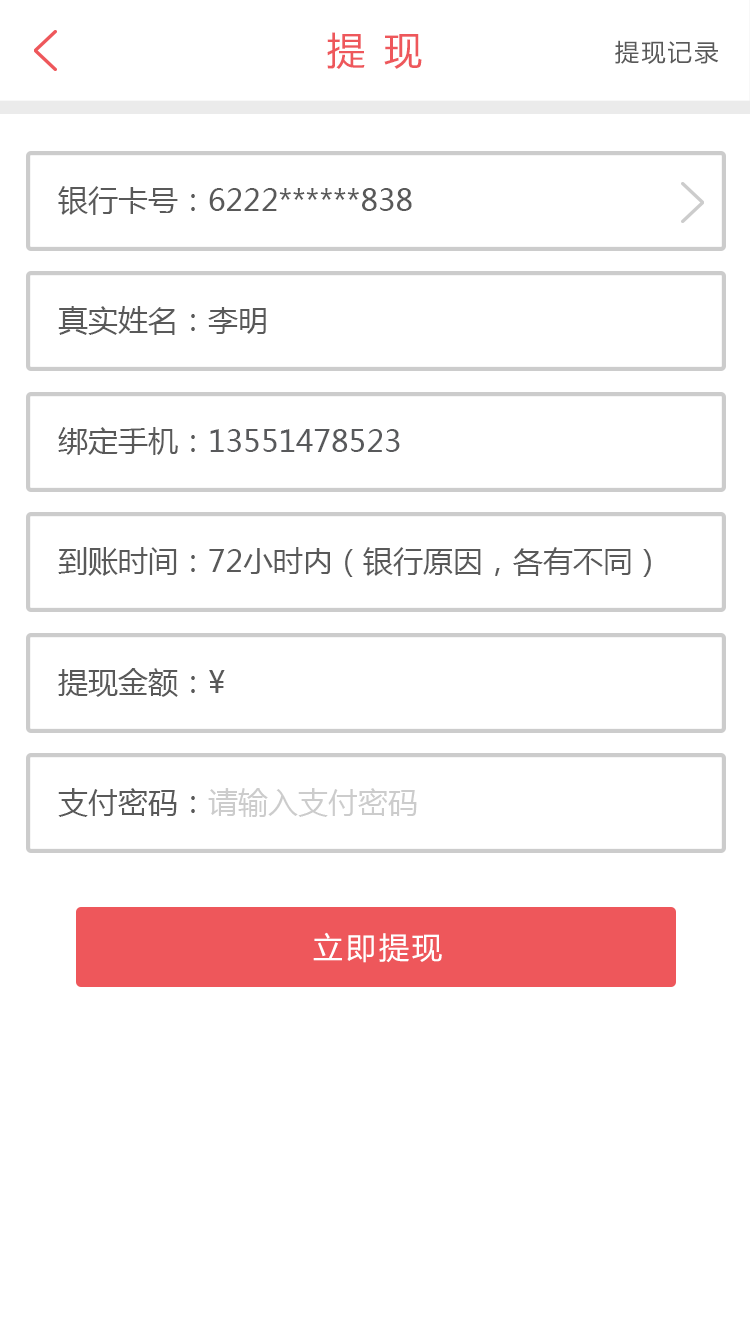
<style>
.page{position:relative;width:750px;height:1334px;background:#ffffff}
.page>*{position:absolute;margin:0}
.t1{font:38px "MicrosoftYaHei";letter-spacing:0.1em;color:#ee575b}
.t2{font:24px "MicrosoftYaHei";letter-spacing:0.1em;color:#595959}
.t3{font:30px "MicrosoftYaHei";color:#595959}
.t4{font:30px "MicrosoftYaHei";color:#58595b}
.t5{font:30px "MicrosoftYaHei";color:#cccccc}
.t6{font:30px "MicrosoftYaHei";letter-spacing:0.1em;color:#ffffff}
</style>
<div class="page">
<p class="t1" style="left:327px;top:32px;width:95px;height:37px">提 现</p>
<p class="t2" style="left:615px;top:40px;width:104px;height:24px">提现记录</p>
<p class="t3" style="left:58px;top:186px;width:354px;height:29px">银行卡号：6222******838</p>
<p class="t3" style="left:58px;top:306px;width:208px;height:29px">真实姓名：李明</p>
<p class="t4" style="left:58px;top:427px;width:342px;height:28px"><span class="t3">绑定手机：</span>13551478523</p>
<p class="t3" style="left:58px;top:547px;width:593px;height:30px">到账时间：72小时内（银行原因，各有不同）</p>
<p class="t3" style="left:58px;top:668px;width:167px;height:29px">提现金额：¥</p>
<p class="t5" style="left:58px;top:788px;width:359px;height:29px"><span class="t3">支付密码：</span>请输入支付密码</p>
<p class="t6" style="left:313px;top:932px;width:129px;height:31px">立即提现</p>
</div>
